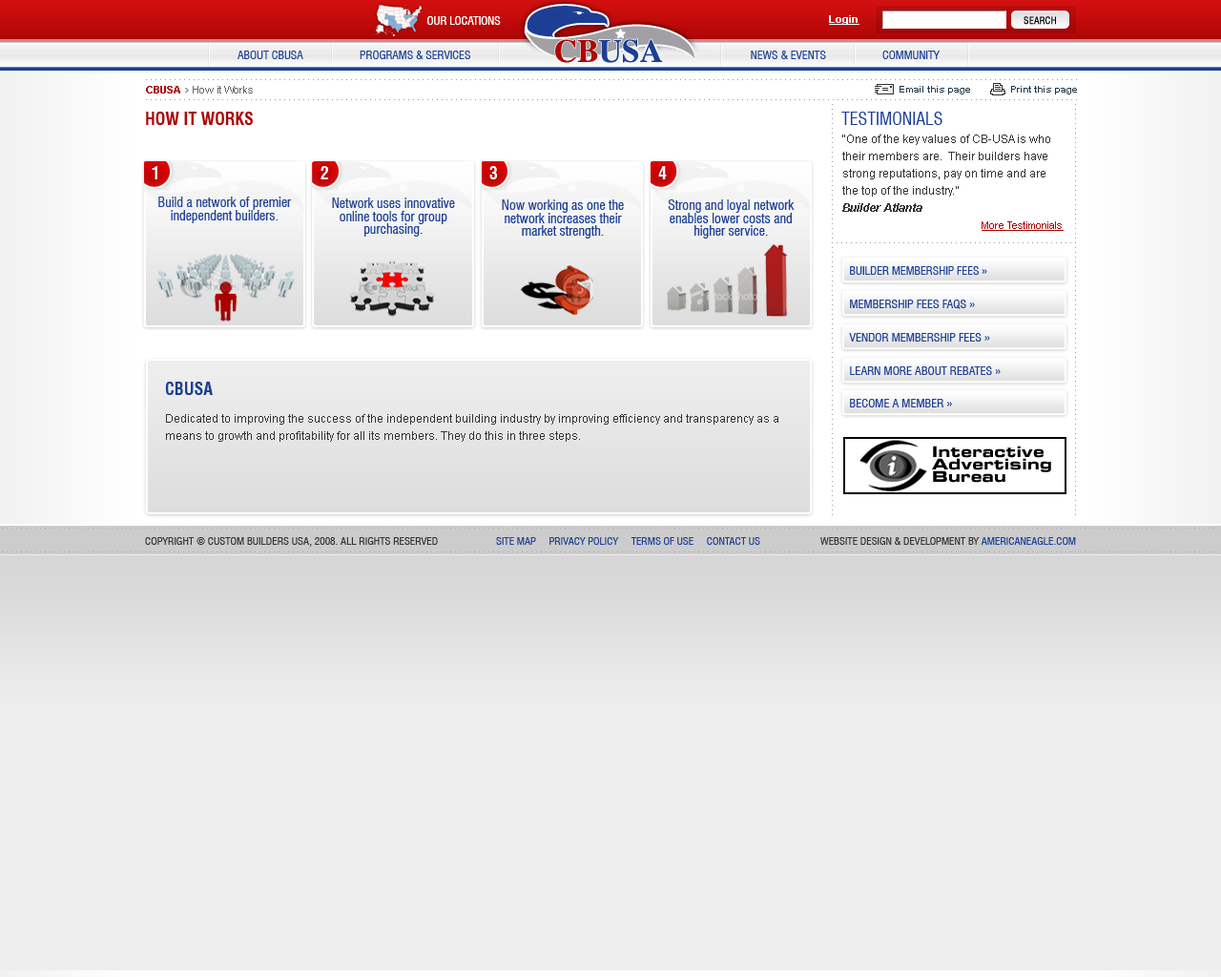
<style>
.page{position:relative;width:1221px;height:977px;background:#eeeeee}
.page>*{position:absolute;margin:0}
.t1{font:11.4px "Swiss721BT-RomanCondensed";letter-spacing:-0.002em;color:#ffffff;text-transform:uppercase}
.t2{font:10.5px "Arial-BoldMT";color:#fffffe;text-decoration:underline}
.t3{font:9.5px "Swiss721BT-RomanCondensed";color:#000000;text-transform:uppercase;font-weight:bold}
.t4{font:11.4px "Swiss721BT-RomanCondensed";letter-spacing:-0.002em;color:#1c3f95;text-transform:uppercase}
.t5{font:10.5px "ArialMT";color:#666666}
.t6{font:10.5px "Arial-BoldMT";color:#ad0505}
.t7{font:9.5px "Arial-BoldMT";color:#1f3749}
.t8{font:17.2px "Swiss721BT-BoldCondensed";color:#ad0505;text-transform:uppercase}
.t9{font:17.2px "Swiss721BT-RomanCondensed";color:#1c3f95;text-transform:uppercase}
.t10{font:11.4px/17.2px "ArialMT";color:#333333}
.t11{font:11.4px/17.2px "Arial-BoldItalicMT";color:#333333}
.t12{font:10.5px/17.2px "ArialMT";color:#ad0505;text-decoration:underline}
.t13{font:17.2px "Swiss721BT-BoldCondensed";color:#ffffff;text-transform:uppercase}
.t14{font:13.4px/12.9px "Swiss721BT-RomanCondensed";color:#1c3f95}
.t15{font:11.4px "Swiss721BT-RomanCondensed";color:#1c3f95;text-transform:uppercase}
.t16{font:11.7px "Swiss721BT-RomanCondensed";color:#1c3f95;text-transform:uppercase}
.t17{font:17.2px "Swiss721BT-BoldCondensed";color:#1c3f95;text-transform:uppercase}
.t18{font:10.5px "Swiss721BT-RomanCondensed";color:#333333;text-transform:uppercase}
.t19{font:10.5px "Swiss721BT-RomanCondensed";color:#1c3f95;text-transform:uppercase}
</style>
<div class="page">
<p class="t1" style="left:427px;top:16px;width:74px;height:9px;opacity:0.75">Our Locations</p>
<p class="t1" style="left:427px;top:16px;width:74px;height:9px">Our Locations</p>
<p class="t2" style="left:829px;top:15px;width:30px;height:10px">Login</p>
<p class="t3" style="left:1023px;top:16px;width:33px;height:9px">Search</p>
<p class="t4" style="left:237px;top:51px;width:703px;height:8px">About CBUSA                    Programs &amp; Services                                                                                                   News &amp; Events                    Community</p>
<p class="t5" style="left:146px;top:86px;width:107px;height:7px"><span class="t6">CBUSA</span>    How it Works</p>
<p class="t7" style="left:899px;top:86px;width:71px;height:8px">Email this page</p>
<p class="t7" style="left:1011px;top:86px;width:66px;height:8px">Print this page</p>
<p class="t8" style="left:146px;top:112px;width:107px;height:13px">How IT WORKS</p>
<p class="t9" style="left:841px;top:112px;width:101px;height:13px">Testimonials</p>
<p class="t10" style="left:842px;top:134px;width:221px;height:97px">“One of the key values of CB-USA is who their members are.  Their builders have strong reputations, pay on time and are the top of the industry.”<br><span class="t11">Builder Atlanta<br></span><span class="t12">More Testimonials</span></p>
<p class="t13" style="left:152px;top:166px;width:5px;height:13px">1</p>
<p class="t13" style="left:320px;top:166px;width:8px;height:13px">2</p>
<p class="t13" style="left:489px;top:166px;width:8px;height:13px">3</p>
<p class="t13" style="left:658px;top:166px;width:9px;height:13px">4</p>
<p class="t14" style="left:158px;top:196px;width:134px;height:27px;text-align:center">Build a network of premier independent builders.</p>
<p class="t14" style="left:332px;top:197px;width:123px;height:40px;text-align:center">Network uses innovative online tools for group purchasing.</p>
<p class="t14" style="left:502px;top:199px;width:122px;height:39px;text-align:center">Now working as one the network increases their market strength.</p>
<p class="t14" style="left:668px;top:199px;width:127px;height:39px;text-align:center">Strong and loyal network enables lower costs and higher service.</p>
<p class="t4" style="left:850px;top:266px;width:137px;height:9px">Builder membership fees <span class="t15">»</span></p>
<p class="t16" style="left:850px;top:299px;width:125px;height:10px">MEMBERSHIP FEES FAQS »</p>
<p class="t16" style="left:849px;top:333px;width:141px;height:8px">VENDOR MEMBERSHIP FEES »</p>
<p class="t16" style="left:850px;top:366px;width:151px;height:9px">LEARN MORE ABOUT REBATES »</p>
<p class="t17" style="left:165px;top:382px;width:48px;height:13px">CBUSA</p>
<p class="t16" style="left:850px;top:399px;width:102px;height:8px">BECOME A MEMBER »</p>
<p class="t10" style="left:166px;top:414px;width:612px;height:28px">Dedicated to improving the success of the independent building industry by improving efficiency and transparency as a means to growth and profitability for all its members. They do this in three steps.</p>
<p class="t18" style="left:145px;top:537px;width:293px;height:10px">Copyright © Custom Builders USA, 2008. All Rights Reserved</p>
<p class="t19" style="left:496px;top:537px;width:264px;height:8px">Site map     Privacy Policy     Terms of Use     Contact Us</p>
<p class="t18" style="left:820px;top:537px;width:256px;height:8px">Website Design &amp; Development by <span class="t19">Americaneagle.com</span></p>
</div>
